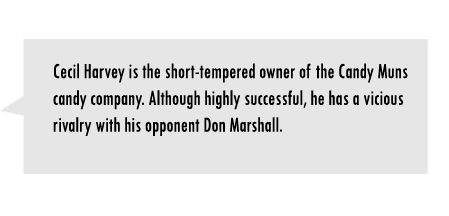
<style>
.page{position:relative;width:449px;height:216px;background:#e6e6e6}
.page>*{position:absolute;margin:0}
.t1{font:22.3px "TwCenMT-Condensed";color:#000000;scale:0.88 1}
</style>
<div class="page">
<p class="t1" style="left:53px;top:63px;width:355px;height:73px">Cecil Harvey is the short-tempered owner of the Candy Muns candy company. Although highly successful, he has a vicious rivalry with his opponent Don Marshall.</p>
</div>
